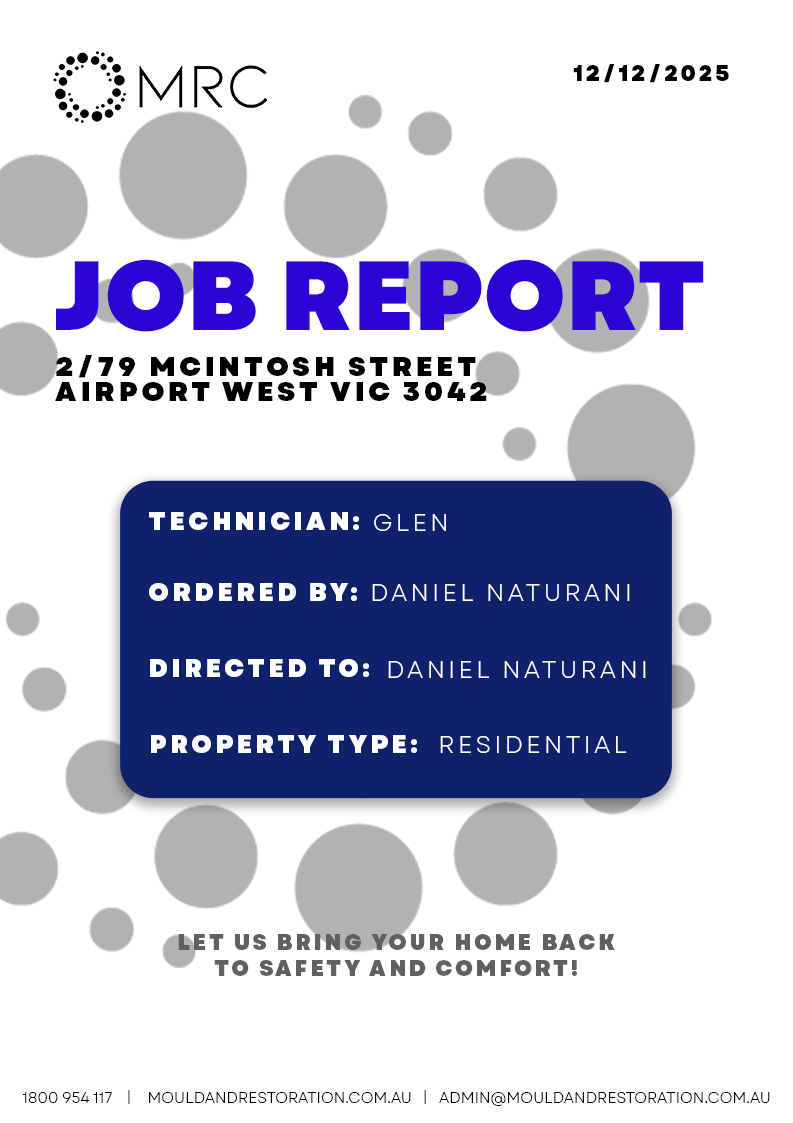
<style>
.page{position:relative;width:793px;height:1123px;background:#ffffff}
.page>*{position:absolute;margin:0}
.t1{font:22px "Garet-Heavy";letter-spacing:0.14em;color:#000000;text-transform:uppercase;scale:0.96 1}
.t2{font:98.2px "Garet-Heavy";letter-spacing:0.005em;color:#2c05d4;text-transform:uppercase}
.t3{font:27.2px/24.7px "Garet-Heavy";letter-spacing:0.14em;color:#000000;text-transform:uppercase}
.t4{font:24.9px "Garet-Heavy";letter-spacing:0.14em;color:#ffffff;text-transform:uppercase}
.t5{font:24.8px "Garet-Book";letter-spacing:0.14em;color:#ffffff;text-transform:uppercase;scale:0.96 1}
.t6{font:22.1px/26px "Garet-Heavy";letter-spacing:0.14em;color:#606060;text-transform:uppercase;scale:0.96 1}
.t7{font:14.9px "Garet-Book";letter-spacing:0.005em;color:#000000;text-transform:uppercase}
</style>
<div class="page">
<p class="t1" style="left:573px;top:64px;width:156px;height:19px">12/12/2025</p>
<p class="t2" style="left:56px;top:259px;width:648px;height:73px">job report</p>
<p class="t3" style="left:55px;top:355px;width:432px;height:46px">2/79 McIntosh Street<br>Airport West VIC 3042</p>
<p class="t4" style="left:149px;top:512px;width:210px;height:18px">TECHNICIAN:</p>
<p class="t5" style="left:374px;top:514px;width:72px;height:17px">GLEN</p>
<p class="t4" style="left:149px;top:583px;width:208px;height:18px">ORDERED BY:</p>
<p class="t5" style="left:372px;top:584px;width:258px;height:17px">Daniel naturani</p>
<p class="t4" style="left:150px;top:659px;width:219px;height:18px">DIRECTED TO:</p>
<p class="t5" style="left:388px;top:661px;width:258px;height:17px">Daniel naturani</p>
<p class="t4" style="left:151px;top:735px;width:266px;height:18px">PROPERTY TYPE:</p>
<p class="t5" style="left:440px;top:736px;width:187px;height:17px">RESIDENTIAL</p>
<p class="t6" style="left:178px;top:934px;width:437px;height:42px;text-align:center">Let us bring your home back to safety and comfort!</p>
<p class="t7" style="left:22px;top:1090px;width:748px;height:16px">1800 954 117  |  mouldandrestoration.com.au  |  admin@mouldandrestoration.com.au</p>
</div>
